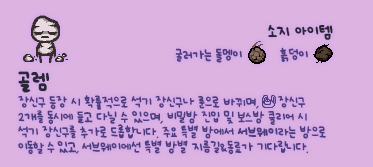
<style>
.page{position:relative;width:373px;height:167px;background:#ddb3e2}
.page>*{position:absolute;margin:0}
.t1{font:12px "UhBeeSe_hyunBold";color:#2b2636}
.t2{font:12px "UhBeeSe_hyunBold";letter-spacing:-0.1em;color:#2b2636}
.t3{font:10px "UhBeeSe_hyunBold";color:#4e3d7c}
.t4{font:10px/15px "UhBeeSe_hyunBold";letter-spacing:-0.025em;color:#4e3d7c}
.t5{font:16px/23px "UhBeeSe_hyunBold";color:#2b2636}
.t6{font:10px/15px "UhBeeSe_hyunBold";letter-spacing:-0.025em;color:#4e3d7c;font-weight:bold}
.t7{font:10px/15px "UhBeeSe_hyunBold";letter-spacing:-0.075em;color:#4e3d7c}
.t8{font:10px/15px "UhBeeSe_hyunBold";color:#4e3d7c}
</style>
<div class="page">
<p class="t1" style="left:268px;top:25px;width:65px;height:15px"><span class="t2">소</span>지 아이템</p>
<p class="t3" style="left:175px;top:48px;width:67px;height:15px">굴러가는 돌멩이</p>
<p class="t3" style="left:280px;top:47px;width:28px;height:15px">흙덩이</p>
<p class="t4" style="left:18px;top:71px;width:308px;height:84px"><span class="t5">골렘<br></span>장신구 등장 시 확률적으로 석기 장신구나 룬으로 바뀌며,     장신구<br>2개를 동시에 들고 다닐 수 있으며, 비밀방 진입 및 보스방 클리어 시 <br>석기 장신구를 추가로 드롭합니다. 주요 특별 방에서 <span class="t6">서브웨이</span>라는 방으로<br><span class="t7">이동할 수 있고, </span>서브웨이에선 특별 방별 지름길&amp;동료가 기<span class="t7">다립</span><span class="t8">니</span><span class="t7">다.</span></p>
</div>
